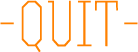
<style>
.page{position:relative;width:138px;height:52px;background:#ffffff}
.page>*{position:absolute;margin:0}
.t1{font:60px "RexLight";color:#ff8100;font-weight:bold}
</style>
<div class="page">
<p class="t1" style="left:0px;top:0px;width:138px;height:52px">-QUIT-</p>
</div>
